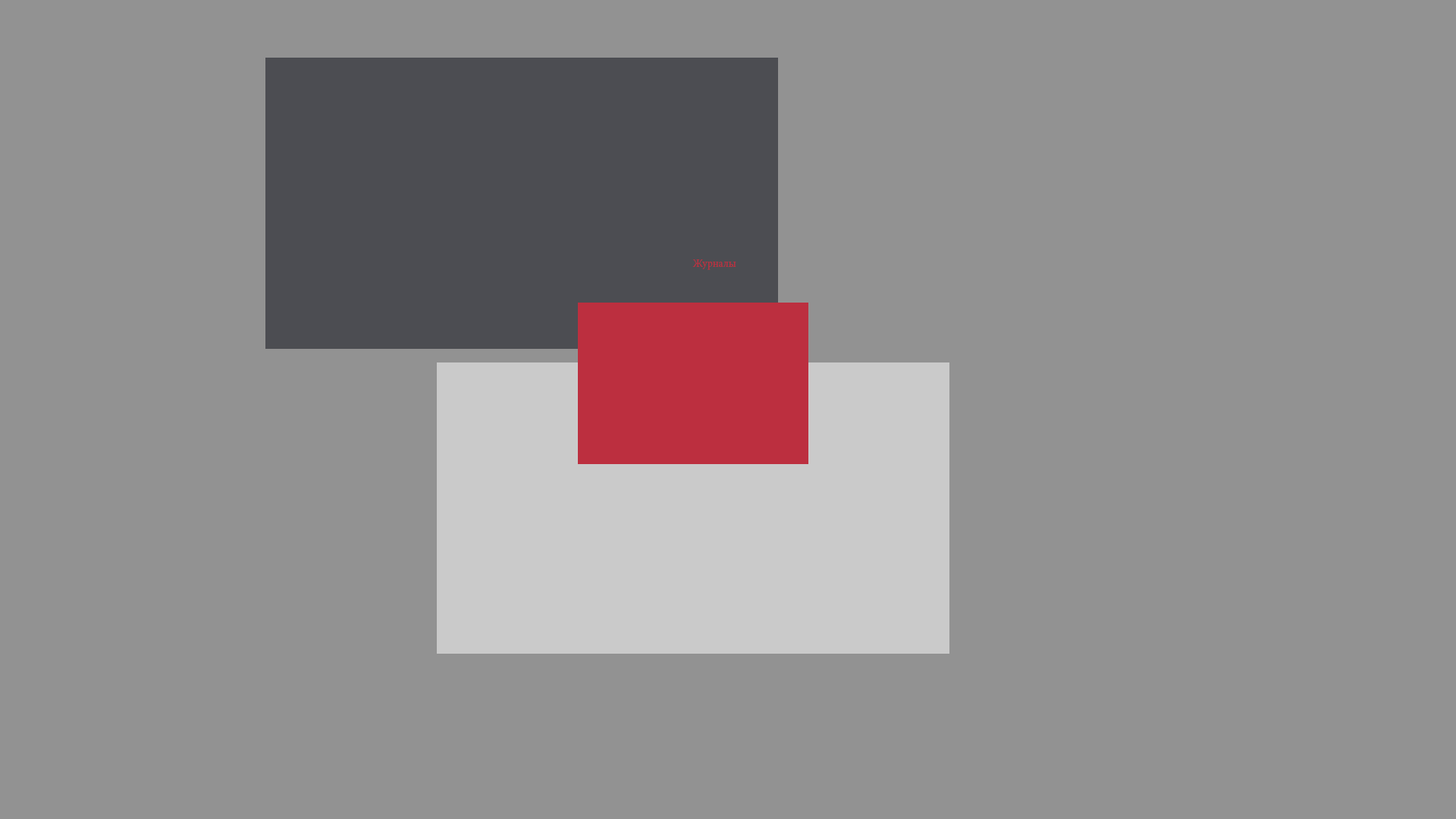
<style>
.page{position:relative;width:1456px;height:819px;background:#929292}
.page>*{position:absolute;margin:0}
.t1{font:10.6px "MinionPro-Regular";color:#bc2f3f}
</style>
<div class="page">
<p class="t1" style="left:692px;top:259px;width:44px;height:11px">Журналы</p>
</div>
